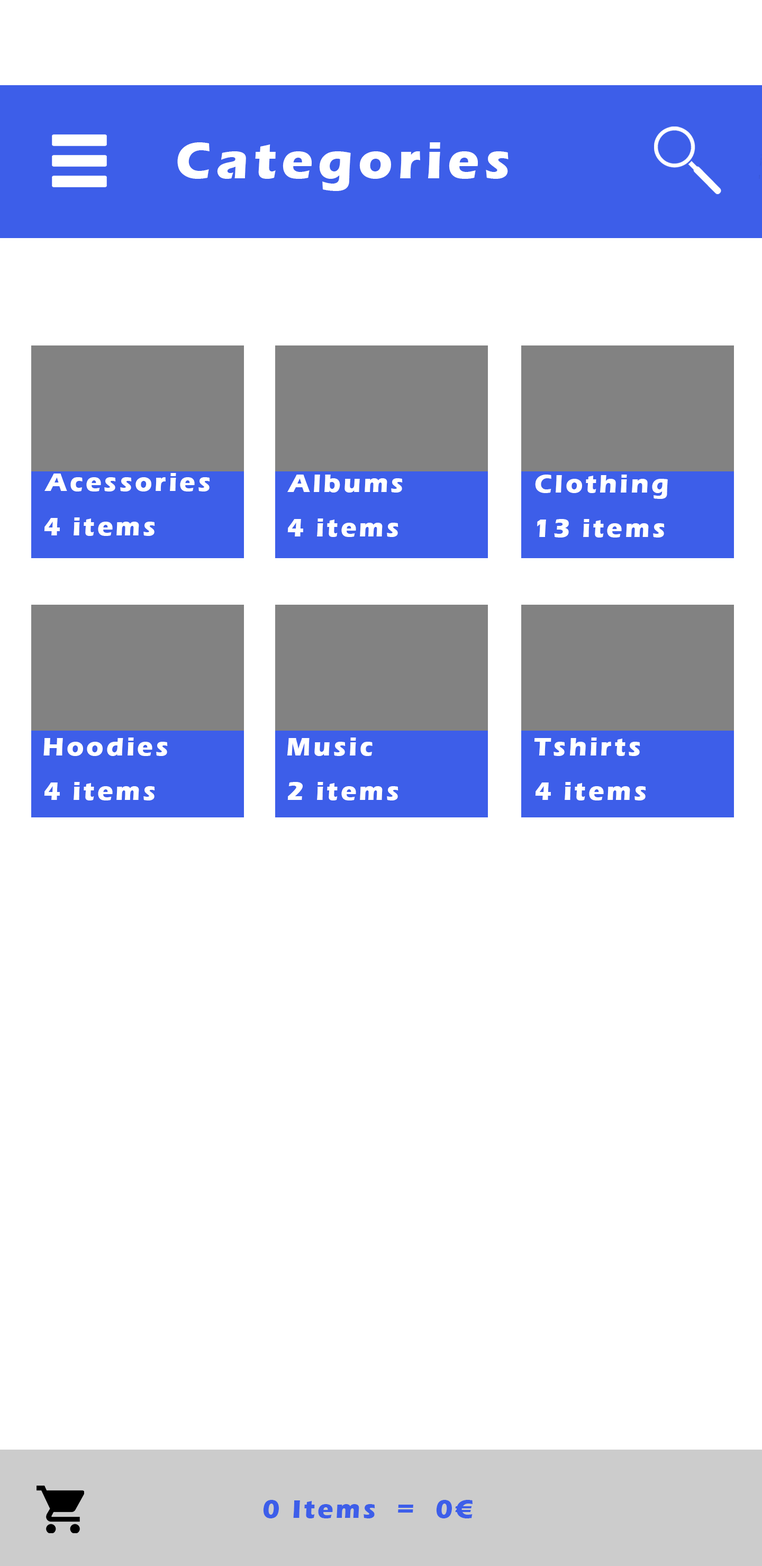
<style>
.page{position:relative;width:762px;height:1566px;background:#ffffff}
.page>*{position:absolute;margin:0}
.t1{font:52.9px "ErasITC-Bold";letter-spacing:0.1em;color:#ffffff}
.t2{font:26.4px "ErasITC-Bold";letter-spacing:0.1em;color:#ffffff}
.t3{font:26.4px "ErasITC-Bold";letter-spacing:0.1em;color:#3d5ee9}
</style>
<div class="page">
<p class="t1" style="left:177px;top:142px;width:331px;height:49px">Categories</p>
<p class="t2" style="left:44px;top:473px;width:166px;height:18px">Acessories</p>
<p class="t2" style="left:287px;top:474px;width:116px;height:18px">Albums</p>
<p class="t2" style="left:535px;top:474px;width:132px;height:25px">Clothing</p>
<p class="t2" style="left:44px;top:517px;width:111px;height:19px">4 items</p>
<p class="t2" style="left:287px;top:518px;width:111px;height:19px">4 items</p>
<p class="t2" style="left:537px;top:519px;width:127px;height:18px">13 items</p>
<p class="t2" style="left:43px;top:737px;width:125px;height:19px">Hoodies</p>
<p class="t2" style="left:287px;top:737px;width:85px;height:19px">Music</p>
<p class="t2" style="left:534px;top:737px;width:106px;height:19px">Tshirts</p>
<p class="t2" style="left:44px;top:782px;width:111px;height:18px">4 items</p>
<p class="t2" style="left:287px;top:782px;width:111px;height:18px">2 items</p>
<p class="t2" style="left:535px;top:782px;width:111px;height:18px">4 items</p>
<p class="t3" style="left:263px;top:1499px;width:209px;height:19px">0 Items  =  0€</p>
</div>
